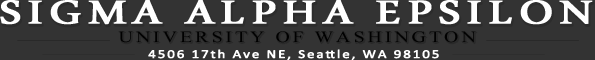
<style>
.page{position:relative;width:595px;height:60px;background:#333333}
.page>*{position:absolute;margin:0}
.t1{font:48px "MicrosoftUighur";letter-spacing:0.1em;color:#ffffff;font-weight:bold;scale:1.25 1}
.t2{font:24px "AngsanaNew";letter-spacing:0.1em;color:#000000;scale:1.25 1}
.t3{font:12px "Calibri";letter-spacing:0.1em;color:#ffffff;font-weight:bold;scale:1.25 1}
</style>
<div class="page">
<p class="t1" style="left:0px;top:0px;width:593px;height:25px">SIGMA ALPHA EPSILON</p>
<p class="t2" style="left:118px;top:31px;width:358px;height:12px">UNIVERSITY OF WASHINGTON</p>
<p class="t3" style="left:148px;top:49px;width:291px;height:11px">4506 17th Ave NE, Seattle, WA 98105</p>
</div>
